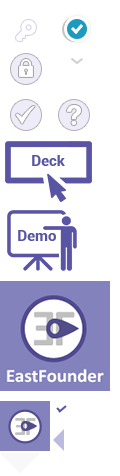
<style>
.page{position:relative;width:120px;height:476px;background:#ffffff}
.page>*{position:absolute;margin:0}
.t1{font:15px "Roboto-Bold";color:#5954a4}
</style>
<div class="page">
<p class="t1" style="left:32px;top:155px;width:33px;height:11px">Deck</p>
<p class="t1" style="left:18px;top:230px;width:38px;height:11px">Demo</p>
</div>
